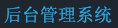
<style>
.page{position:relative;width:118px;height:28px;background:#1f262d}
.page>*{position:absolute;margin:0}
.t1{font:18px "SimSun";color:#27a9e3}
</style>
<div class="page">
<p class="t1" style="left:4px;top:6px;width:108px;height:17px">后台管理系统</p>
</div>
